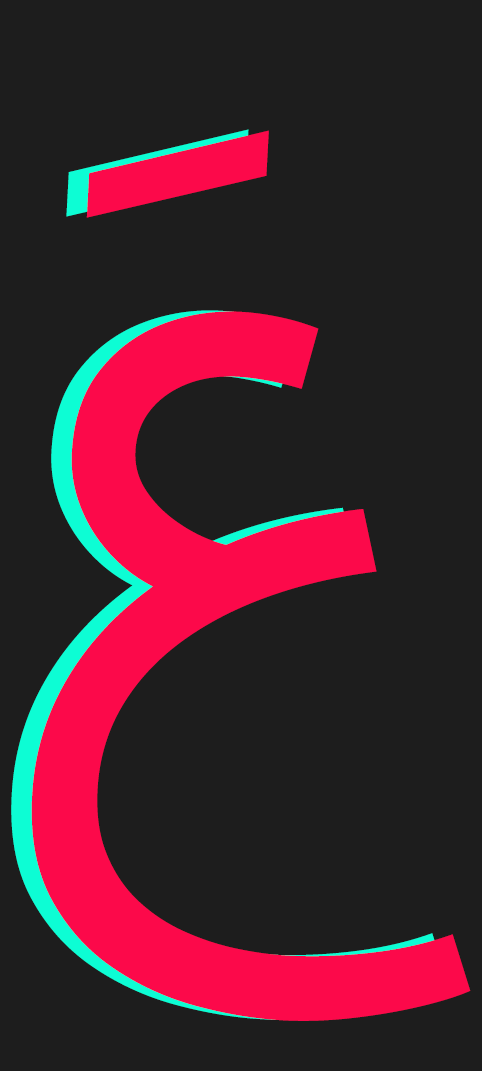
<style>
.page{position:relative;width:482px;height:1071px;background:#1d1d1d}
.page>*{position:absolute;margin:0}
.t1{font:789.5px "NotoSansArabic-Regular";color:#fc094a}
</style>
<div class="page">
<p class="t1" style="left:11px;top:129px;width:439px;height:891px;rotate:3deg">َع</p>
<p class="t1" style="left:31px;top:130px;width:440px;height:891px;rotate:3deg">َع</p>
</div>
